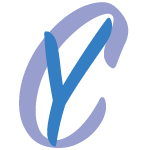
<style>
.page{position:relative;width:150px;height:150px;background:#ffffff}
.page>*{position:absolute;margin:0}
.t1{font:227.1px "SignPainter-HouseScript";color:#989fce}
.t2{font:180.2px "SignPainter-HouseScript";color:#347fc4}
</style>
<div class="page">
<p class="t1" style="left:19px;top:2px;width:110px;height:146px">C</p>
<p class="t2" style="left:44px;top:17px;width:68px;height:130px;rotate:-12deg">Y</p>
</div>
